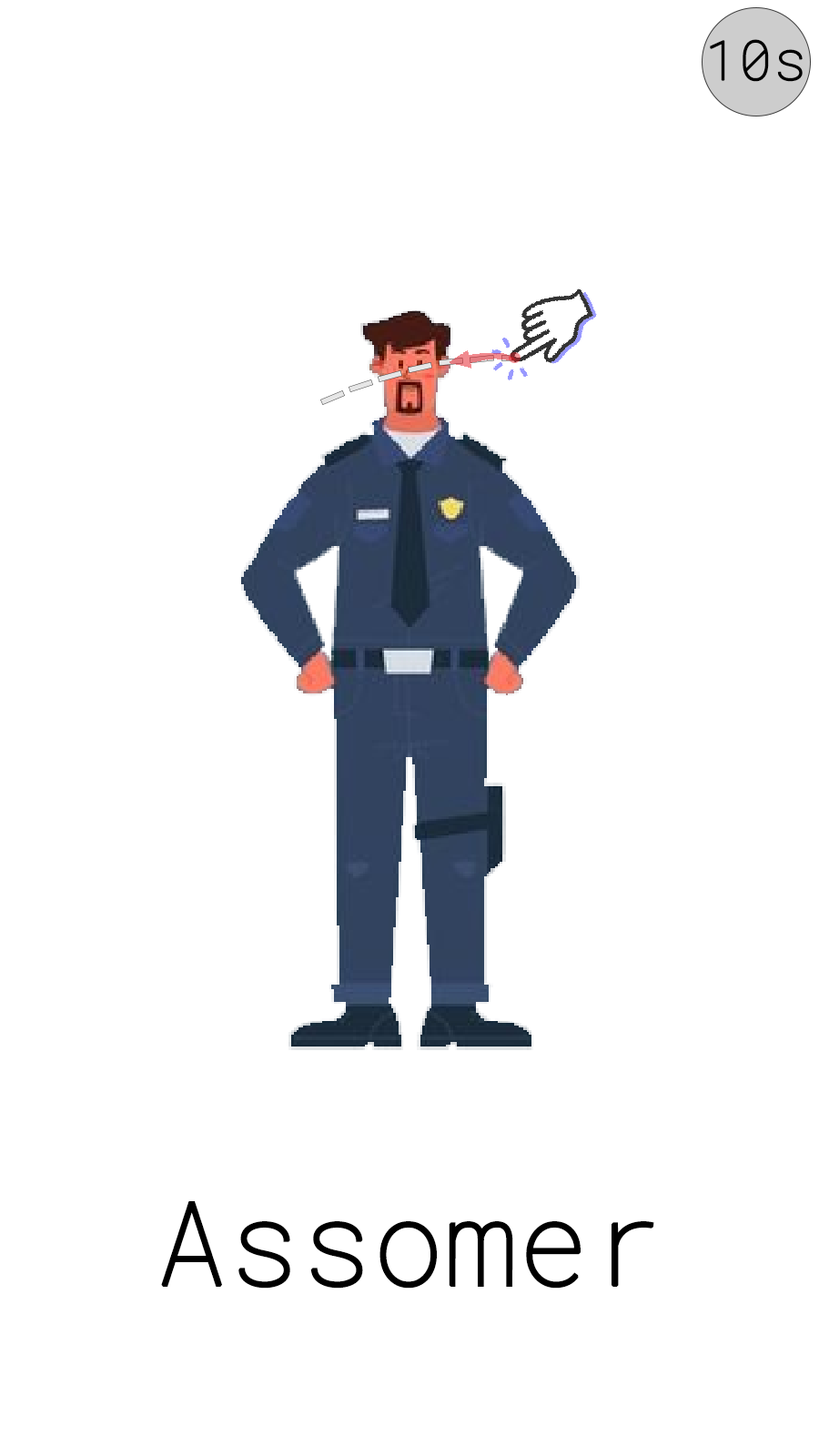
<style>
.page{position:relative;width:819px;height:1456px;background:#ffffff}
.page>*{position:absolute;margin:0}
.t1{font:115.6px "RobotoMono-Thin";color:#000000;font-weight:bold}
</style>
<div class="page">
<p class="t1" style="left:161px;top:1201px;width:493px;height:88px">Assomer</p>
</div>
